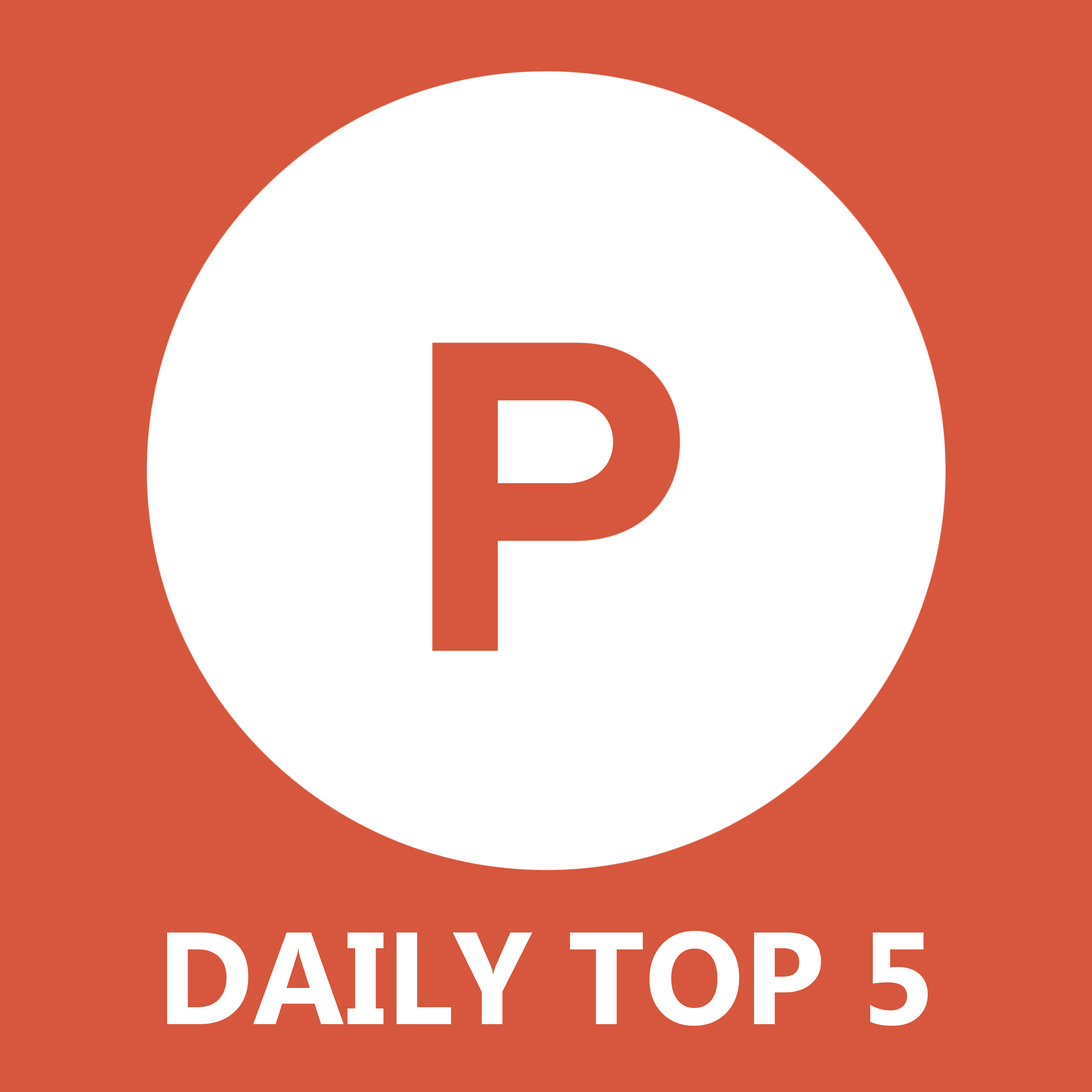
<style>
.page{position:relative;width:1092px;height:1092px;background:#d6573d}
.page>*{position:absolute;margin:0}
.t1{font:130.6px "LaoUI-Bold";color:#ffffff}
</style>
<div class="page">
<p class="t1" style="left:167px;top:931px;width:761px;height:95px">DAILY TOP 5</p>
</div>
